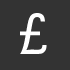
<style>
.page{position:relative;width:70px;height:70px;background:#333333}
.page>*{position:absolute;margin:0}
.t1{font:60px "CorporateS-Regular";color:#ffffff}
</style>
<div class="page">
<p class="t1" style="left:20px;top:13px;width:27px;height:41px">£</p>
</div>
